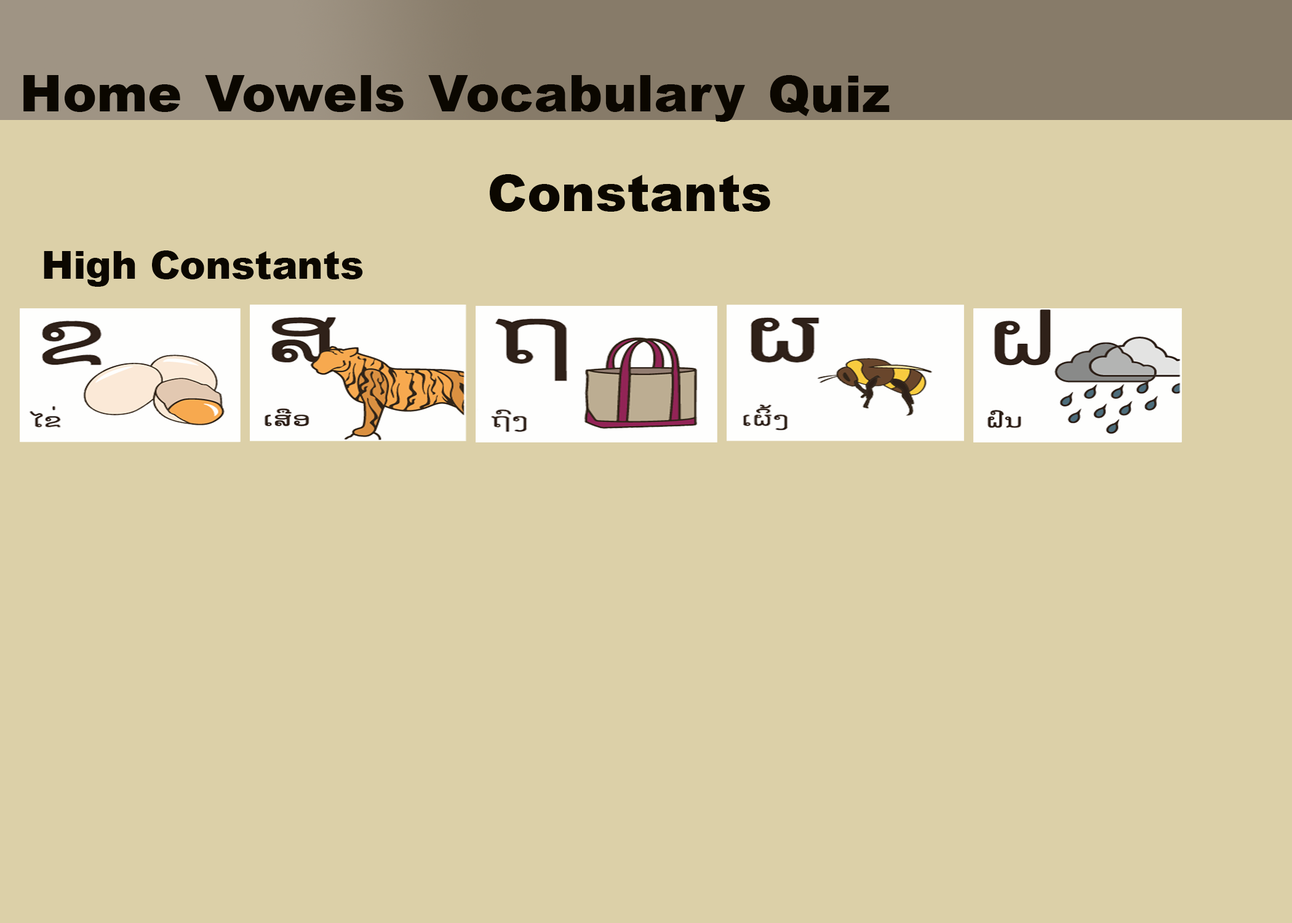
<style>
.page{position:relative;width:1292px;height:923px;background:#dcd0a8}
.page>*{position:absolute;margin:0}
.t1{font:51.3px "Arial-Black";color:#0b0700}
.t2{font:38.5px "Arial-Black";color:#0b0700}
</style>
<div class="page">
<p class="t1" style="left:23px;top:75px;width:157px;height:37px">Home</p>
<p class="t1" style="left:205px;top:75px;width:199px;height:37px">Vowels</p>
<p class="t1" style="left:428px;top:75px;width:317px;height:47px">Vocabulary</p>
<p class="t1" style="left:770px;top:75px;width:120px;height:41px">Quiz</p>
<p class="t1" style="left:490px;top:174px;width:280px;height:38px">Constants</p>
<p class="t2" style="left:44px;top:250px;width:319px;height:37px">High Constants</p>
</div>
